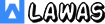
<style>
.page{position:relative;width:105px;height:24px;background:#ffffff}
.page>*{position:absolute;margin:0}
.t1{font:25.1px "ActionManShaded";color:#000000}
</style>
<div class="page">
<p class="t1" style="left:27px;top:1px;width:65px;height:23px">Lawa</p>
<p class="t1" style="left:89px;top:1px;width:17px;height:23px">s</p>
</div>
